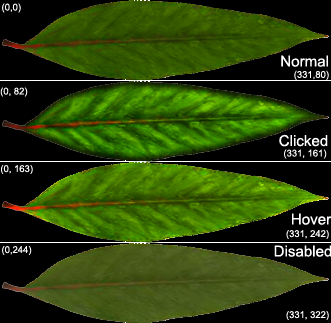
<style>
.page{position:relative;width:331px;height:323px;background:#000000}
.page>*{position:absolute;margin:0}
.t1{font:9.4px "ArialMT";color:#ffffff}
.t2{font:15.1px "ArialMT";color:#ffffff}
</style>
<div class="page">
<p class="t1" style="left:2px;top:3px;width:19px;height:10px">(0,0)</p>
<p class="t1" style="left:281px;top:55px;width:48px;height:25px;text-align:right"><span class="t2">Normal<br></span>(331,80)</p>
<p class="t1" style="left:0px;top:87px;width:28px;height:10px">(0, 82)</p>
<p class="t2" style="left:279px;top:134px;width:49px;height:13px">Clicked</p>
<p class="t1" style="left:284px;top:149px;width:43px;height:10px">(331, 161)</p>
<p class="t1" style="left:1px;top:165px;width:32px;height:9px">(0, 163)</p>
<p class="t2" style="left:292px;top:213px;width:40px;height:12px">Hover</p>
<p class="t1" style="left:286px;top:230px;width:43px;height:9px">(331, 242)</p>
<p class="t1" style="left:2px;top:246px;width:30px;height:9px">(0,244)</p>
<p class="t2" style="left:274px;top:245px;width:58px;height:12px">Disabled</p>
<p class="t1" style="left:286px;top:311px;width:43px;height:9px">(331, 322)</p>
</div>
